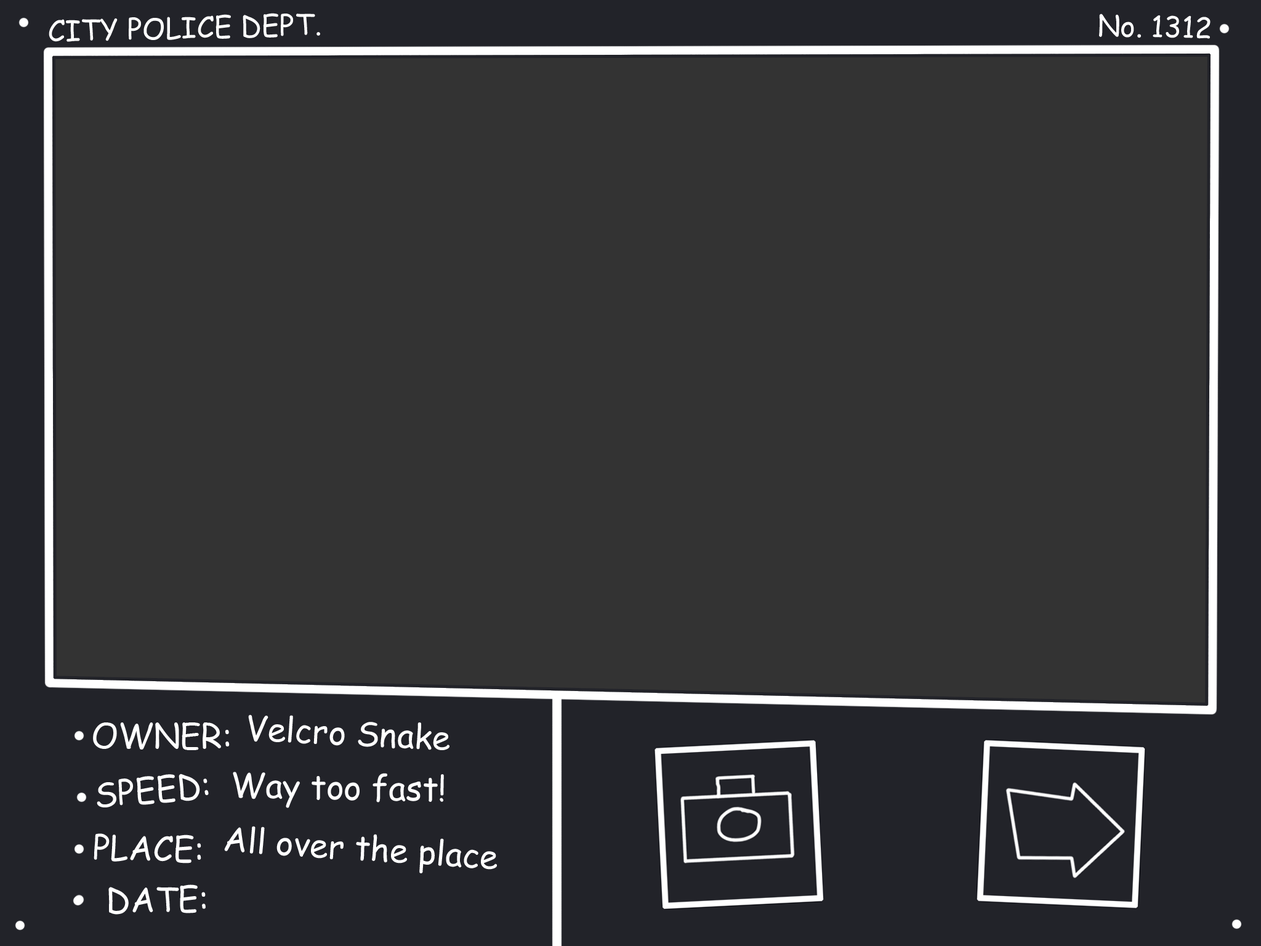
<style>
.page{position:relative;width:1261px;height:946px;background:#333333}
.page>*{position:absolute;margin:0}
.t1{font:28.8px "ComicSansMS";color:#ffffff}
.t2{font:33.6px "ComicSansMS";color:#ffffff}
</style>
<div class="page">
<p class="t1" style="left:49px;top:13px;width:271px;height:29px;rotate:-1deg">CITY POLICE DEPT.</p>
<p class="t1" style="left:1099px;top:14px;width:111px;height:25px;rotate:2deg">No. 1312</p>
<p class="t2" style="left:93px;top:722px;width:137px;height:28px">OWNER:</p>
<p class="t2" style="left:248px;top:714px;width:201px;height:36px;rotate:3deg">Velcro Snake</p>
<p class="t2" style="left:97px;top:773px;width:112px;height:34px;rotate:-5deg">SPEED:</p>
<p class="t2" style="left:233px;top:771px;width:211px;height:37px;rotate:1deg">Way too fast!</p>
<p class="t2" style="left:94px;top:833px;width:107px;height:30px;rotate:1deg">PLACE:</p>
<p class="t2" style="left:224px;top:826px;width:273px;height:47px;rotate:4deg">All over the place</p>
<p class="t2" style="left:108px;top:884px;width:98px;height:30px;rotate:-1deg">DATE:</p>
</div>
